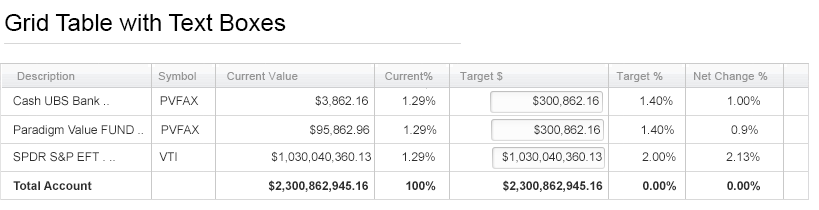
<style>
.page{position:relative;width:819px;height:210px;background:#ffffff}
.page>*{position:absolute;margin:0}
.t1{font:24px/28px "ArialMT";color:#000000}
.t2{font:11px "ArialMT";letter-spacing:0.025em;color:#949494}
.t3{font:12px "ArialMT";color:#2e2e2e}
.t4{font:12px "Arial-BoldMT";color:#2e2e2e}
</style>
<div class="page">
<p class="t1" style="left:5px;top:13px;width:281px;height:18px">Grid Table with Text Boxes<br><br>2</p>
<p class="t2" style="left:17px;top:72px;width:751px;height:10px">Description                         Symbol         Current Value                          Current%        Target $                                  Target %         Net Change %</p>
<p class="t3" style="left:13px;top:95px;width:747px;height:12px">Cash UBS Bank ..               PVFAX                                   $3,862.16          1.29%                             $300,862.16            1.40%                1.00%</p>
<p class="t3" style="left:14px;top:124px;width:744px;height:13px">Paradigm Value FUND ..     PVFAX                                 $95,862.96          1.29%                             $300,862.16            1.40%                 0.9%</p>
<p class="t3" style="left:13px;top:151px;width:747px;height:12px">SPDR S&amp;P EFT . ..             VTI                            $1,030,040,360.13         1.29%                    $1,030,040,360.13            2.00%               2.13%</p>
<p class="t4" style="left:13px;top:180px;width:747px;height:12px">Total Account                                                     $2,300,862,945.16           100%                    $2,300,862,945.16            0.00%               0.00%</p>
</div>
